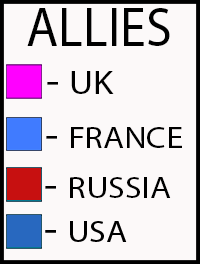
<style>
.page{position:relative;width:200px;height:264px;background:#fcf9f9}
.page>*{position:absolute;margin:0}
.t1{font:55px "MyriadPro-Regular";color:#000000;scale:0.95 1}
.t2{font:33.9px "MyriadPro-Regular";color:#000000;scale:1.1 1}
.t3{font:40px "MyriadPro-Regular";color:#000000;scale:1.1 1}
.t4{font:31.2px "MyriadPro-Regular";color:#000000;scale:1.1 1}
</style>
<div class="page">
<p class="t1" style="left:27px;top:8px;width:143px;height:38px">ALLIES</p>
<p class="t2" style="left:47px;top:71px;width:67px;height:23px"><span class="t3">- </span>UK</p>
<p class="t4" style="left:46px;top:127px;width:136px;height:21px"><span class="t3">- </span>FRANCE</p>
<p class="t4" style="left:45px;top:177px;width:126px;height:21px"><span class="t3">- </span>RUSSIA</p>
</div>
